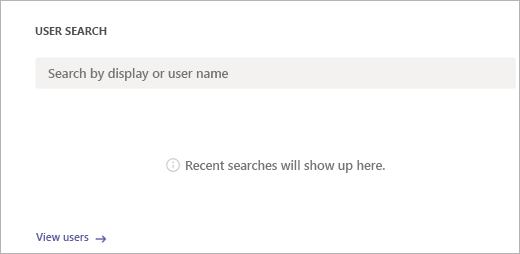
<style>
.page{position:relative;width:520px;height:254px;background:#ffffff}
.page>*{position:absolute;margin:0}
.t1{font:10.9px "SegoeUI-Bold";color:#505050}
.t2{font:12.8px "SegoeUI-Semibold";color:#757575}
.t3{font:10.9px "SegoeUI-Semibold";color:#5c60a3}
</style>
<div class="page">
<p class="t1" style="left:35px;top:27px;width:72px;height:8px">USER SEARCH</p>
<p class="t2" style="left:48px;top:68px;width:181px;height:13px">Search by display or user name</p>
<p class="t2" style="left:186px;top:160px;width:199px;height:13px">Recent searches will show up here.</p>
<p class="t3" style="left:36px;top:233px;width:53px;height:8px">View users</p>
</div>
